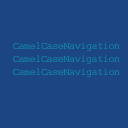
<style>
.page{position:relative;width:128px;height:128px;background:#1b4583}
.page>*{position:absolute;margin:0}
.t1{font:10px "Courier";color:#137ba1}
</style>
<div class="page">
<p class="t1" style="left:13px;top:42px;width:107px;height:9px">CamelCaseNavigation</p>
<p class="t1" style="left:13px;top:55px;width:107px;height:9px">CamelCaseNavigation</p>
<p class="t1" style="left:13px;top:68px;width:107px;height:9px">CamelCaseNavigation</p>
</div>
